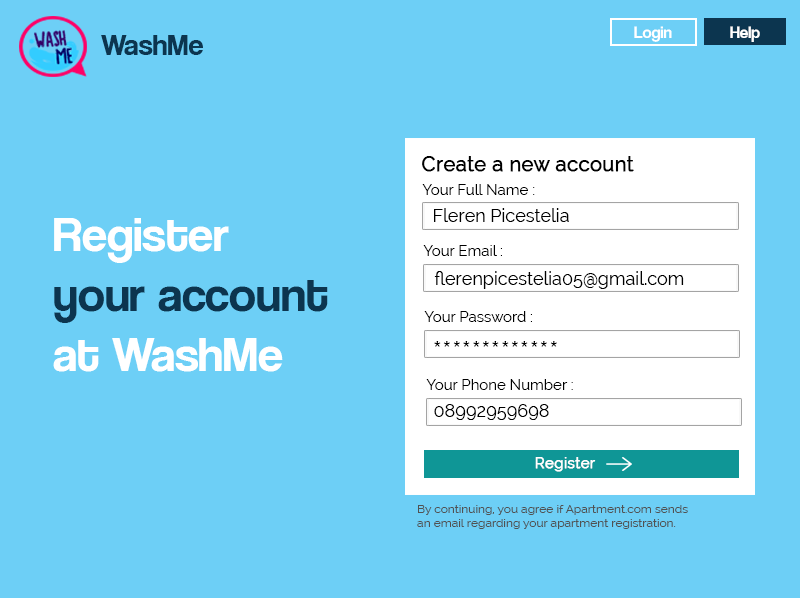
<style>
.page{position:relative;width:800px;height:600px;background:#6dcff6}
.page>*{position:absolute;margin:0}
.t1{font:16px "CoolveticaRg-Regular";color:#ffffff;scale:1.06 1}
.t2{font:30px "CoolveticaRg-Regular";color:#0c354f}
.t3{font:20px "Raleway";color:#000000;font-weight:bold}
.t4{font:15px "Raleway";color:#000000}
.t5{font:18px "Raleway";color:#000000}
.t6{font:50px "CoolveticaRg-Regular";color:#0c354f}
.t7{font:50px "CoolveticaRg-Regular";color:#ffffff}
.t8{font:30px "Raleway";color:#000000}
.t9{font:15px "Raleway";color:#ffffff;font-weight:bold}
.t10{font:12px "Raleway";color:#515252}
</style>
<div class="page">
<p class="t1" style="left:634px;top:26px;width:38px;height:16px">Login</p>
<p class="t1" style="left:730px;top:26px;width:30px;height:16px">Help</p>
<p class="t2" style="left:101px;top:35px;width:102px;height:20px">WashMe</p>
<p class="t3" style="left:422px;top:156px;width:212px;height:16px">Create a new account</p>
<p class="t4" style="left:422px;top:184px;width:113px;height:11px">Your Full Name :</p>
<p class="t5" style="left:434px;top:208px;width:135px;height:14px">Fleren Picestelia</p>
<p class="t6" style="left:53px;top:218px;width:275px;height:154px"><span class="t7">Register<br></span>your account<br><span class="t7">at WashMe</span></p>
<p class="t4" style="left:423px;top:245px;width:79px;height:11px">Your Email :</p>
<p class="t5" style="left:434px;top:271px;width:250px;height:18px">flerenpicestelia05@gmail.com</p>
<p class="t4" style="left:424px;top:311px;width:108px;height:11px">Your Password :</p>
<p class="t8" style="left:434px;top:341px;width:123px;height:6px">*************</p>
<p class="t4" style="left:426px;top:379px;width:147px;height:11px">Your Phone Number :</p>
<p class="t5" style="left:434px;top:404px;width:115px;height:16px">08992959698</p>
<p class="t9" style="left:535px;top:457px;width:61px;height:15px">Register</p>
<p class="t10" style="left:417px;top:505px;width:271px;height:24px">By continuing, you agree if Apartment.com sends <br>an email regarding your apartment registration.</p>
</div>
